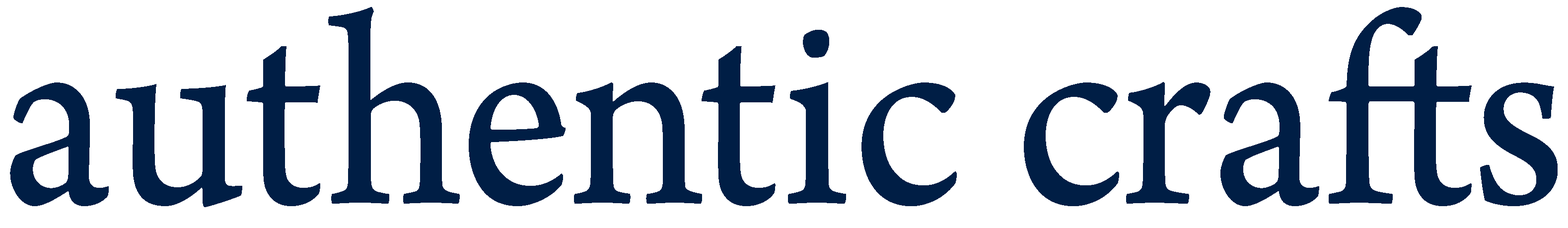
<style>
.page{position:relative;width:1568px;height:228px;background:#ffffff}
.page>*{position:absolute;margin:0}
.t1{font:289.6px "ArnoPro-SmText";color:#001e45;scale:0.93 1}
</style>
<div class="page">
<p class="t1" style="left:10px;top:7px;width:1548px;height:200px">authentic crafts</p>
</div>
